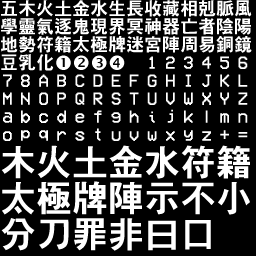
<style>
.page{position:relative;width:256px;height:256px;background:#000000}
.page>*{position:absolute;margin:0}
.t1{font:18px/18px "H2gtrE";color:#ffffff}
.t2{font:18px/18px "VCROSDMono";letter-spacing:0.42em;color:#ffffff}
.t3{font:36px/36px "H2gtrE";color:#ffffff}
</style>
<div class="page">
<p class="t1" style="left:1px;top:0px;width:251px;height:71px">五木火土金水生長收藏相剋脈風<br>學靈氣逐鬼現界冥神器亡者陰陽<br>地勢符籍太極牌迷宮陣周易銅鏡<br>豆乳化</p>
<p class="t2" style="left:3px;top:56px;width:245px;height:85px">123456<br>78ABCDEFGHIJKL<br>MNOPQRSTUVWXYZ<br>abcdefghijklmn<br>opqrstuvwxyz+=</p>
<p class="t3" style="left:1px;top:145px;width:249px;height:106px">木火土金水符籍<br>太極牌陣示不小<br>分刀罪非曰口</p>
</div>
